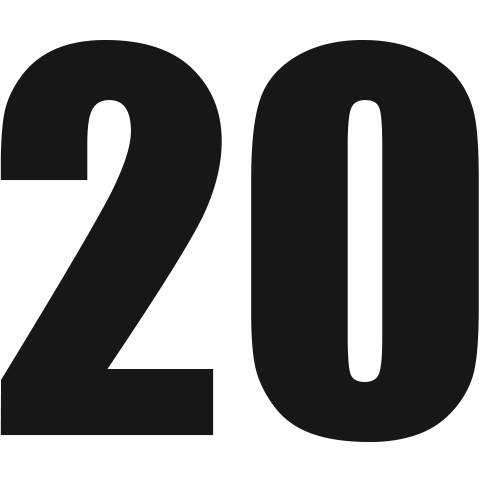
<style>
.page{position:relative;width:480px;height:480px;background:#171717}
.page>*{position:absolute;margin:0}
.t1{font:490.3px "Impact";color:#171717}
</style>
<div class="page">
<p class="t1" style="left:0px;top:40px;width:479px;height:402px">20</p>
</div>
